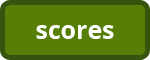
<style>
.page{position:relative;width:150px;height:60px;background:#577f08}
.page>*{position:absolute;margin:0}
.t1{font:25px "OpenSans-Bold";color:#ffffff}
</style>
<div class="page">
<p class="t1" style="left:36px;top:25px;width:78px;height:14px">scores</p>
</div>
